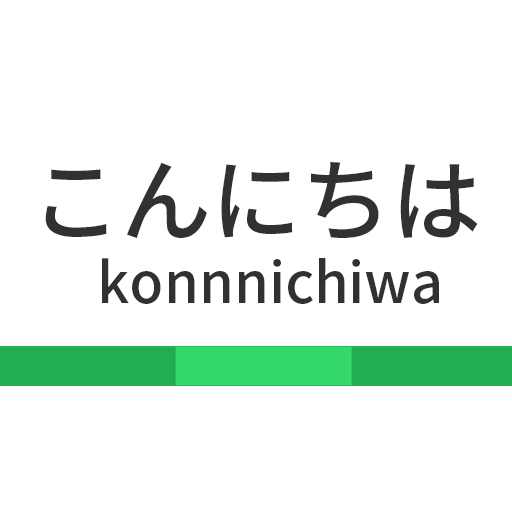
<style>
.page{position:relative;width:512px;height:512px;background:#ffffff}
.page>*{position:absolute;margin:0}
.t1{font:90.2px "NotoSansCJKhk-Medium";color:#313131}
.t2{font:56px "NotoSansCJKhk-Medium";color:#313131}
</style>
<div class="page">
<p class="t1" style="left:45px;top:162px;width:433px;height:76px">こんにちは</p>
<p class="t2" style="left:102px;top:258px;width:337px;height:46px">konnnichiwa</p>
</div>
